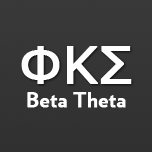
<style>
.page{position:relative;width:152px;height:152px}
.page>*{position:absolute;margin:0}
.t1{font:51px "MSReferenceSansSerif";color:#ffffff;font-weight:bold}
.t2{font:20.9px "Verlag-Bold";color:#ffffff;font-weight:bold}
</style>
<div class="page">
<p class="t1" style="left:21px;top:46px;width:111px;height:38px">ΦΚΣ</p>
<p class="t2" style="left:27px;top:92px;width:99px;height:16px">Beta Theta</p>
</div>
